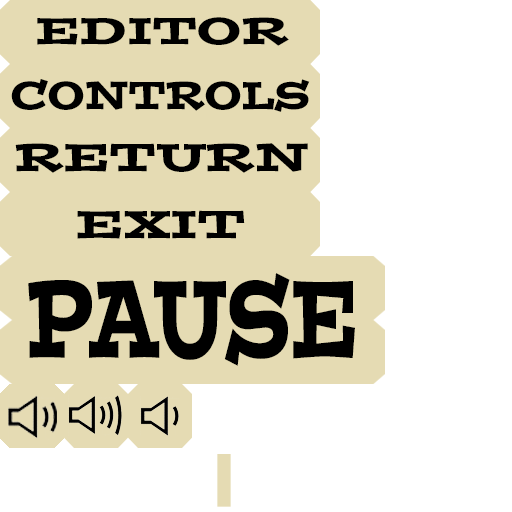
<style>
.page{position:relative;width:512px;height:512px;background:#ffffff}
.page>*{position:absolute;margin:0}
.t1{font:37.5px "PostinoStd";color:#000000;scale:1.21 1}
.t2{font:38.8px "PostinoStd";color:#000000}
.t3{font:38.7px "PostinoStd";color:#000000;scale:1.21 1}
.t4{font:38.8px "PostinoStd";color:#000000;scale:1.26 1}
.t5{font:109.4px "PostinoStd";color:#000000;scale:0.63 1}
</style>
<div class="page">
<p class="t1" style="left:37px;top:17px;width:252px;height:29px">EDITOR</p>
<p class="t2" style="left:11px;top:79px;width:299px;height:33px">CONTROLS</p>
<p class="t3" style="left:15px;top:143px;width:293px;height:30px">RETURN</p>
<p class="t4" style="left:77px;top:210px;width:168px;height:29px">EXIT</p>
<p class="t5" style="left:28px;top:273px;width:327px;height:93px">PAUSE</p>
</div>
